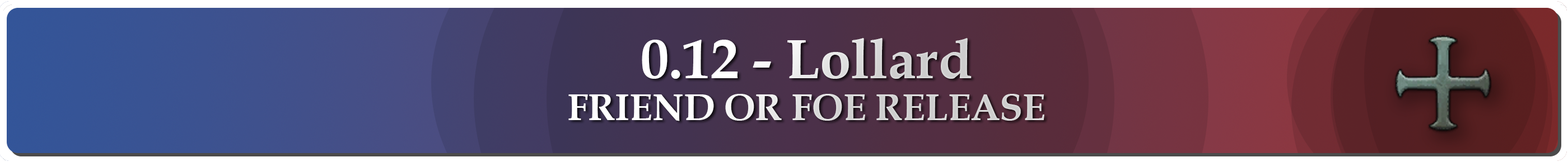
<style>
.page{position:relative;width:1568px;height:162px}
.page>*{position:absolute;margin:0}
.t1{font:37.3px/42px "BookAntiqua-Bold"}
.t2{font:56px "BookAntiqua-Bold"}
</style>
<div class="page">
<p class="t1" style="left:568px;top:38px;width:476px;height:84px;text-align:center"><span class="t2">0.12 - Lollard<br></span>FRIEND OR FOE RELEASE</p>
</div>
